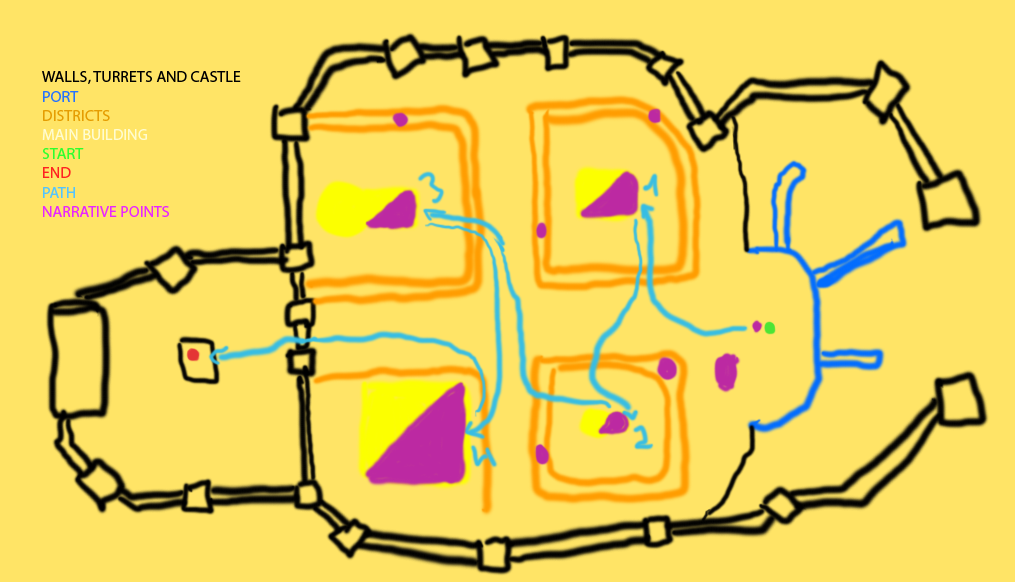
<style>
.page{position:relative;width:1015px;height:582px;background:#ffe466}
.page>*{position:absolute;margin:0}
.t1{font:16px "MyriadPro-Regular";color:#000000}
.t2{font:16px "MyriadPro-Regular";color:#2572ff}
.t3{font:16px "MyriadPro-Regular";color:#e59d02}
.t4{font:16px "MyriadPro-Regular";color:#fffcd0}
.t5{font:16px "MyriadPro-Regular";color:#2eff2e}
.t6{font:16px "MyriadPro-Regular";color:#ff2121}
.t7{font:16px "MyriadPro-Regular";color:#53c4ff}
.t8{font:16px "MyriadPro-Regular";color:#e827ff}
</style>
<div class="page">
<p class="t1" style="left:42px;top:71px;width:199px;height:146px">WALLS, TURRETS AND CASTLE<br><span class="t2">PORT<br></span><span class="t3">DISTRICTS<br></span><span class="t4">MAIN BUILDING<br></span><span class="t5">START<br></span><span class="t6">END<br></span><span class="t7">PATH<br></span><span class="t8">NARRATIVE POINTS</span></p>
</div>
